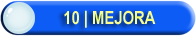
<style>
.page{position:relative;width:196px;height:36px;background:#0d5cf6}
.page>*{position:absolute;margin:0}
.t1{font:18px "ArialNarrow-Bold";color:#f7fd94}
</style>
<div class="page">
<p class="t1" style="left:64px;top:10px;width:92px;height:18px">10 | MEJORA</p>
</div>
